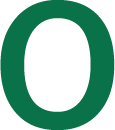
<style>
.page{position:relative;width:115px;height:130px;background:#ffffff}
.page>*{position:absolute;margin:0}
.t1{font:240px "TrebuchetMS";color:#0a7248}
</style>
<div class="page">
<p class="t1" style="left:0px;top:0px;width:115px;height:130px">o</p>
</div>
